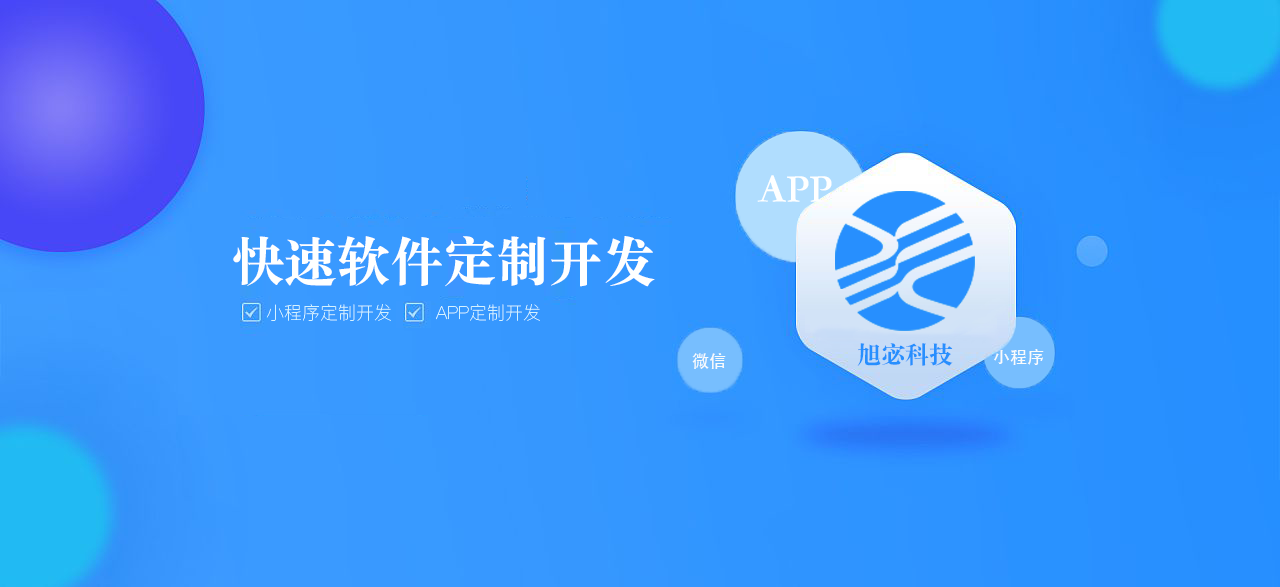
<style>
.page{position:relative;width:1280px;height:587px}
.page>*{position:absolute;margin:0}
.t1{font:40px "STSongti-SC-Black";color:#feffff}
.t2{font:53px "STSongti-SC-Black";color:#feffff}
.t3{font:18px "PingFangHK-Ultralight";color:#d5f2ff}
.t4{font:17px "STHeitiTC-Medium";color:#f9fbfc}
.t5{font:24px "STSongti-SC-Black";color:#278ffe}
</style>
<div class="page">
<p class="t1" style="left:757px;top:175px;width:75px;height:27px">APP</p>
<p class="t2" style="left:233px;top:236px;width:422px;height:51px">快速软件定制开发</p>
<p class="t3" style="left:266px;top:304px;width:125px;height:17px">小程序定制开发</p>
<p class="t3" style="left:436px;top:304px;width:104px;height:17px">APP定制开发</p>
<p class="t4" style="left:692px;top:353px;width:34px;height:16px">微信</p>
<p class="t5" style="left:857px;top:343px;width:96px;height:23px">旭宓科技</p>
<p class="t4" style="left:994px;top:349px;width:50px;height:16px">小程序</p>
</div>
